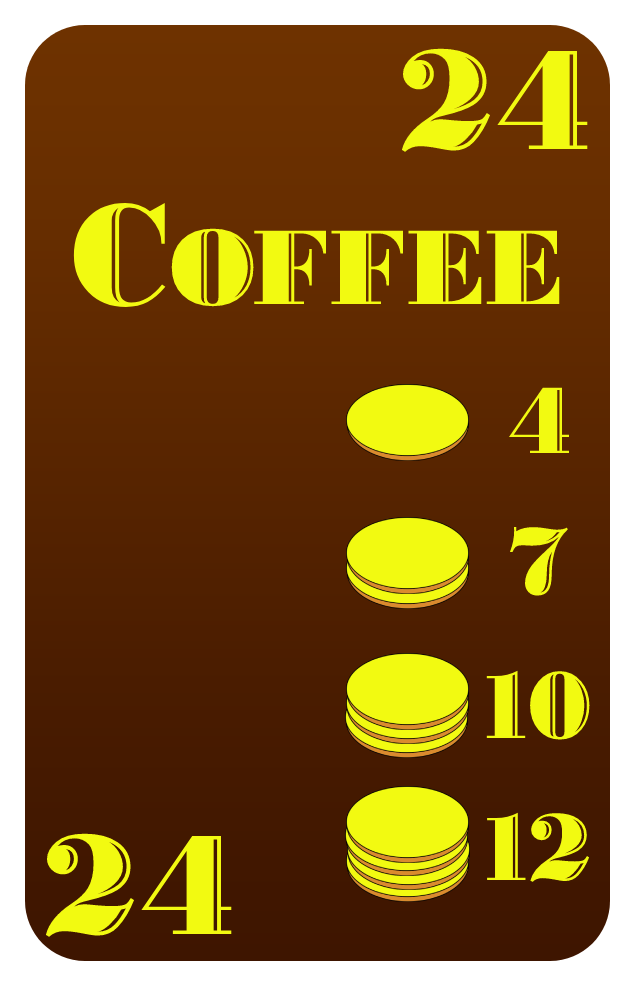
<style>
.page{position:relative;width:635px;height:986px}
.page>*{position:absolute;margin:0}
.t1{font:150px "BodoniHighlightICG";color:#f2fa11}
.t2{font:112px "BodoniHighlightICG";color:#f2fa11}
.t3{font:100px "BodoniHighlightICG";color:#f2fa11}
</style>
<div class="page">
<p class="t1" style="left:401px;top:48px;width:187px;height:104px">24</p>
<p class="t2" style="left:73px;top:203px;width:487px;height:104px"><span class="t1">C</span>OFFEE</p>
<p class="t3" style="left:508px;top:387px;width:61px;height:66px">4</p>
<p class="t3" style="left:510px;top:527px;width:58px;height:69px">7</p>
<p class="t3" style="left:486px;top:670px;width:104px;height:70px">10</p>
<p class="t3" style="left:487px;top:812px;width:103px;height:70px">12</p>
<p class="t1" style="left:45px;top:833px;width:187px;height:104px">24</p>
</div>
